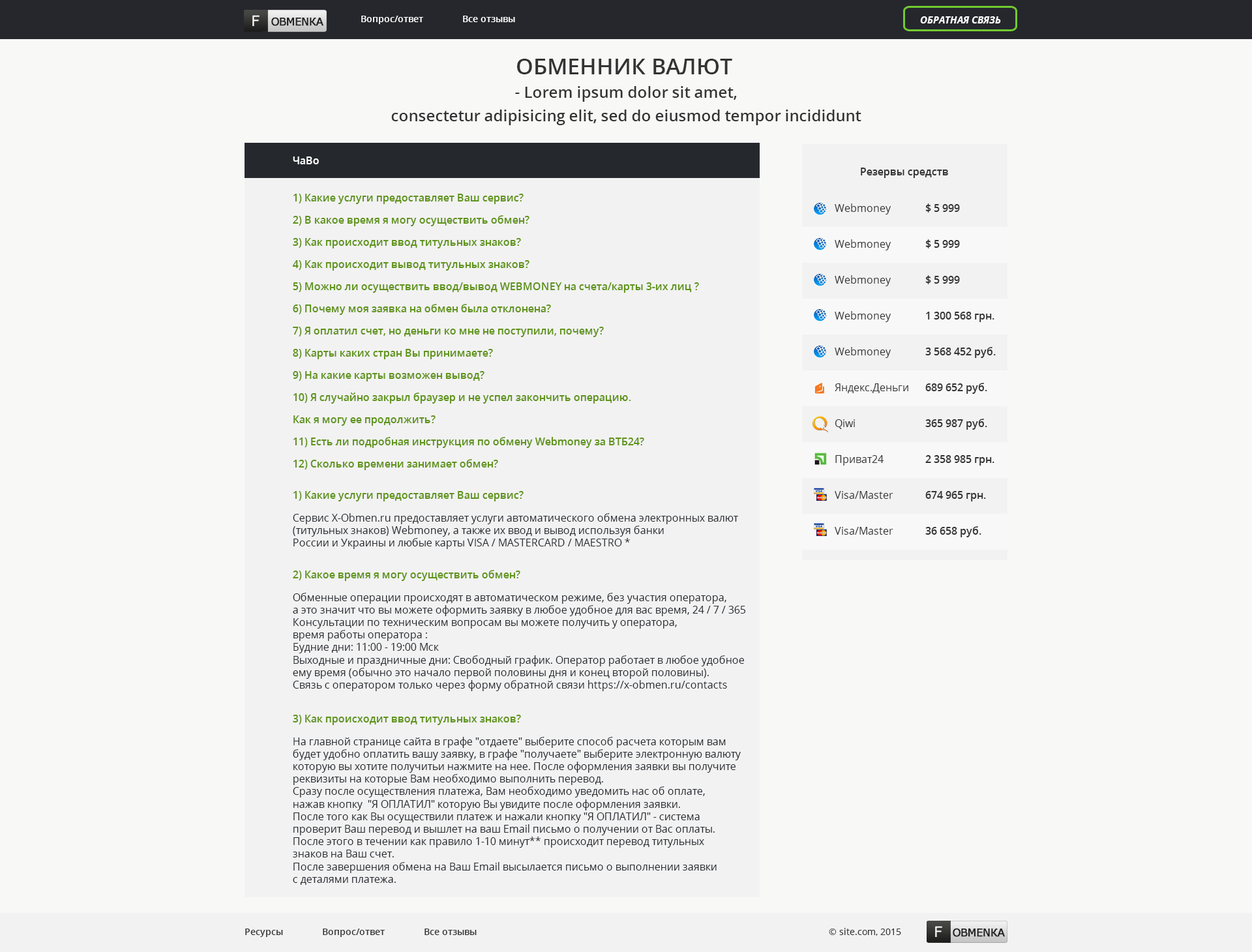
<style>
.page{position:relative;width:1252px;height:952px;background:#f8f9f7}
.page>*{position:absolute;margin:0}
.t1{font:14.6px "MSReferenceSansSerif";color:#fcf8f8;text-transform:uppercase}
.t2{font:10.8px "MSReferenceSansSerif";letter-spacing:-0.075em;color:#232222;text-transform:uppercase;font-weight:bold}
.t3{font:9.1px "OpenSans-Semibold";color:#ffffff}
.t4{font:9.8px "OpenSans-BoldItalic";color:#ffffff;text-transform:uppercase}
.t5{font:15.7px/23.5px "OpenSans-Semibold";color:#333333}
.t6{font:22.2px/23.5px "OpenSans-Semibold";color:#333333;text-transform:uppercase}
.t7{font:10.4px "OpenSans-Semibold";color:#ffffff}
.t8{font:10.4px "OpenSans-Semibold";color:#333333}
.t9{font:10.4px/22.2px "OpenSans-Semibold";color:#5e9318}
.t10{font:10.4px/35.9px "OpenSans";color:#333333}
.t11{font:10.4px/35.9px "OpenSans-Semibold";color:#333333}
.t12{font:10.4px "OpenSans-Semibold";color:#5e9318}
.t13{font:10.4px "OpenSans";color:#25292e}
.t14{font:9.1px "OpenSans-Semibold";color:#333333}
.t15{font:9.1px "OpenSans";color:#333333}
</style>
<div class="page">
<p class="t1" style="left:252px;top:15px;width:8px;height:11px">f</p>
<p class="t2" style="left:271px;top:17px;width:52px;height:9px">Obmenка</p>
<p class="t3" style="left:361px;top:16px;width:154px;height:8px">Вопрос/ответ               Все отзывы</p>
<p class="t4" style="left:920px;top:16px;width:81px;height:7px">Обратная связь</p>
<p class="t5" style="left:391px;top:59px;width:471px;height:66px;text-align:center"><span class="t6">Обменник валют <br></span>- Lorem ipsum dolor sit amet,<br>consectetur adipisicing elit, sed do eiusmod tempor incididunt</p>
<p class="t7" style="left:293px;top:157px;width:26px;height:7px">ЧаВо</p>
<p class="t8" style="left:861px;top:168px;width:87px;height:10px">Резервы средств</p>
<p class="t9" style="left:292px;top:194px;width:407px;height:276px">1) Какие услуги предоставляет Ваш сервис?<br>2) В какое время я могу осуществить обмен?<br>3) Как происходит ввод титульных знаков?<br>4) Как происходит вывод титульных знаков?<br>5) Можно ли осуществить ввод/вывод WEBMONEY на счета/карты 3-их лиц ?<br>6) Почему моя заявка на обмен была отклонена?<br>7) Я оплатил счет, но деньги ко мне не поступили, почему?<br>8) Карты каких стран Вы принимаете?<br>9) На какие карты возможен вывод?<br>10) Я случайно закрыл браузер и не успел закончить операцию. <br>Как я могу ее продолжить?<br>11) Есть ли подробная инструкция по обмену Webmoney за ВТБ24?<br>12) Сколько времени занимает обмен?</p>
<p class="t10" style="left:835px;top:203px;width:74px;height:332px">Webmoney<br>Webmoney<br>Webmoney<br>Webmoney<br>Webmoney<br>Яндекс.Деньги<br>Qiwi<br>Приват24<br>Visa/Master<br>Visa/Master</p>
<p class="t11" style="left:925px;top:203px;width:71px;height:334px">$ 5 999<br>$ 5 999<br>$ 5 999<br>1 300 568 грн.<br>3 568 452 руб.<br>689 652 руб.<br>365 987 руб.<br>2 358 985 грн.<br>674 965 грн.<br>36 658 руб.</p>
<p class="t12" style="left:293px;top:491px;width:231px;height:11px">1) Какие услуги предоставляет Ваш сервис?</p>
<p class="t13" style="left:293px;top:513px;width:445px;height:36px">Сервис X-Obmen.ru предоставляет услуги автоматического обмена электронных валют<br>(титульных знаков) Webmoney, а также их ввод и вывод используя банки <br>России и Украины и любые карты VISA / MASTERCARD / MAESTRO *</p>
<p class="t12" style="left:293px;top:570px;width:227px;height:11px">2) Какое время я могу осуществить обмен?</p>
<p class="t13" style="left:293px;top:593px;width:453px;height:98px">Обменные операции происходят в автоматическом режиме, без участия оператора, <br>а это значит что вы можете оформить заявку в любое удобное для вас время, 24 / 7 / 365<br>Консультации по техническим вопросам вы можете получить у оператора, <br>время работы оператора :<br>Будние дни: 11:00 - 19:00 Мск<br>Выходные и праздничные дни: Свободный график. Оператор работает в любое удобное <br>ему время (обычно это начало первой половины дня и конец второй половины).  <br>Связь с оператором только через форму обратной связи https://x-obmen.ru/contacts</p>
<p class="t12" style="left:293px;top:715px;width:228px;height:10px">3) Как происходит ввод титульных знаков?</p>
<p class="t13" style="left:293px;top:737px;width:448px;height:148px">На главной странице сайта в графе "отдаете" выберите способ расчета которым вам <br>будет удобно оплатить вашу заявку, в графе "получаете" выберите электронную валюту <br>которую вы хотите получитьи нажмите на нее. После оформления заявки вы получите <br>реквизиты на которые Вам необходимо выполнить перевод. <br>Сразу после осуществления платежа, Вам необходимо уведомить нас об оплате, <br>нажав кнопку  "Я ОПЛАТИЛ" которую Вы увидите после оформления заявки. <br>После того как Вы осуществили платеж и нажали кнопку "Я ОПЛАТИЛ" - система <br>проверит Ваш перевод и вышлет на ваш Email письмо о получении от Вас оплаты. <br>После этого в течении как правило 1-10 минут** происходит перевод титульных <br>знаков на Ваш счет. <br>После завершения обмена на Ваш Email высылается письмо о выполнении заявки <br>с деталями платежа.</p>
<p class="t14" style="left:245px;top:929px;width:232px;height:8px">Ресурсы               Вопрос/ответ               Все отзывы</p>
<p class="t15" style="left:829px;top:928px;width:72px;height:8px">© site.com, 2015</p>
<p class="t1" style="left:935px;top:926px;width:7px;height:11px">f</p>
<p class="t2" style="left:953px;top:928px;width:52px;height:9px">Obmenка</p>
</div>
